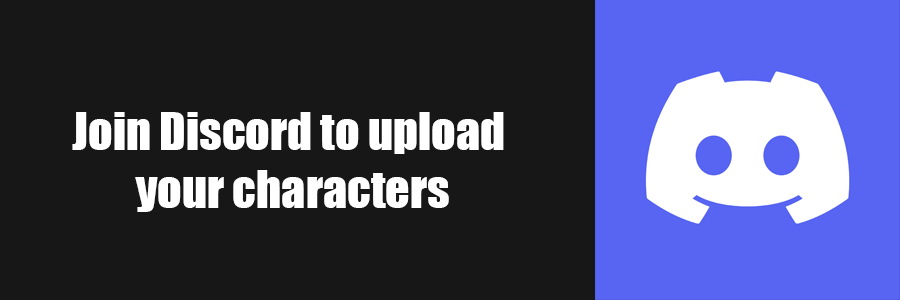
<style>
.page{position:relative;width:900px;height:300px;background:#171717}
.page>*{position:absolute;margin:0}
.t1{font:48px "Impact";color:#ffffff}
</style>
<div class="page">
<p class="t1" style="left:72px;top:112px;width:432px;height:100px;text-align:center">Join Discord to upload<br> your characters</p>
</div>
